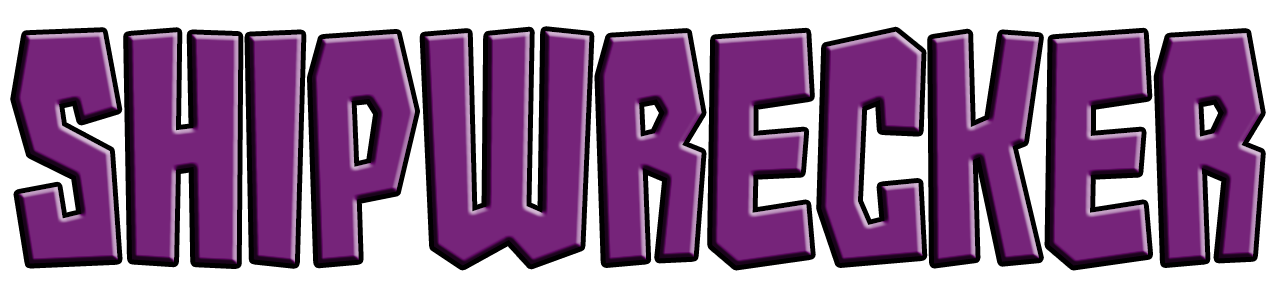
<style>
.page{position:relative;width:1280px;height:300px;background:#76247a}
.page>*{position:absolute;margin:0}
.t1{font:278px "Kaiju-Monster__G";color:#670c6b}
</style>
<div class="page">
<p class="t1" style="left:15px;top:31px;width:1246px;height:235px">Shipwrecker</p>
</div>
